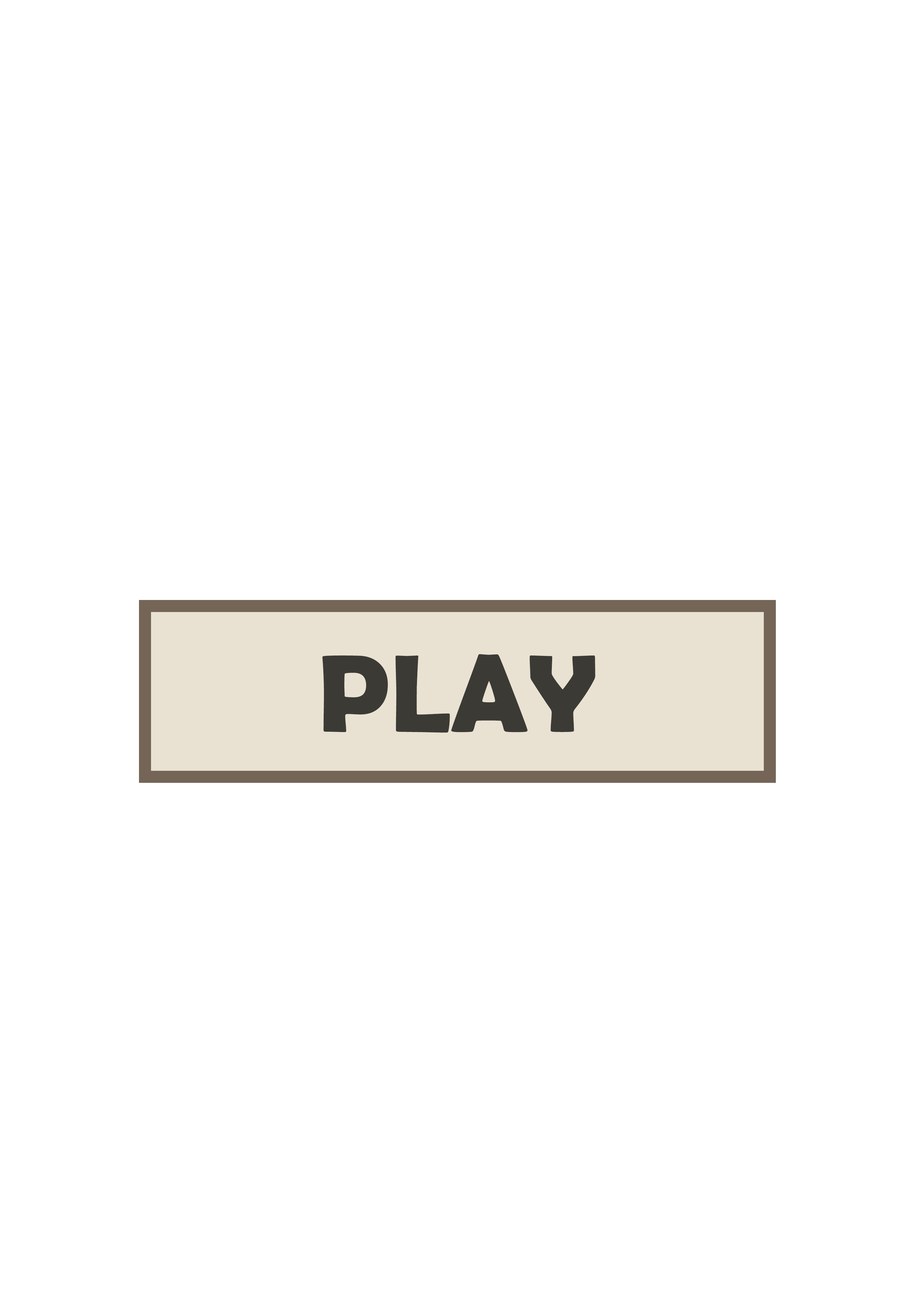
<style>
.page{position:relative;width:918px;height:1299px;background:#ffffff}
.page>*{position:absolute;margin:0}
.t1{font:111.1px "BerlinSansFBDemi-Bold";color:#3c3a35}
</style>
<div class="page">
<p class="t1" style="left:322px;top:654px;width:273px;height:79px">PLAY</p>
</div>
